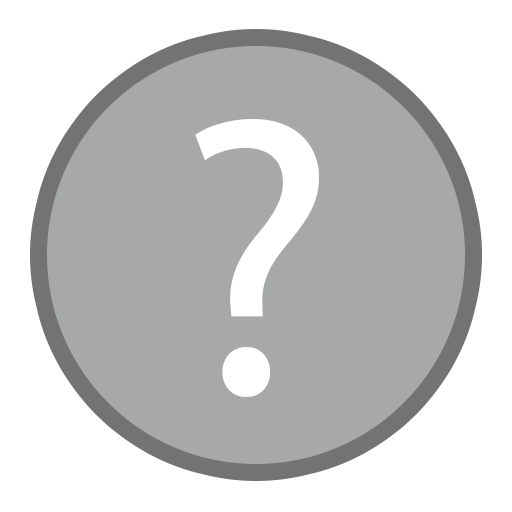
<style>
.page{position:relative;width:512px;height:512px;background:#a7a8a8}
.page>*{position:absolute;margin:0}
.t1{font:400px "MyriadPro-Regular";color:#ffffff}
</style>
<div class="page">
<p class="t1" style="left:195px;top:119px;width:124px;height:278px">?</p>
</div>
